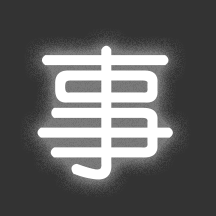
<style>
.page{position:relative;width:216px;height:216px;background:#333333}
.page>*{position:absolute;margin:0}
.t1{font:140.6px "YouYuan";color:#ffffff;font-weight:bold}
</style>
<div class="page">
<p class="t1" style="left:37px;top:45px;width:136px;height:135px">事</p>
</div>
